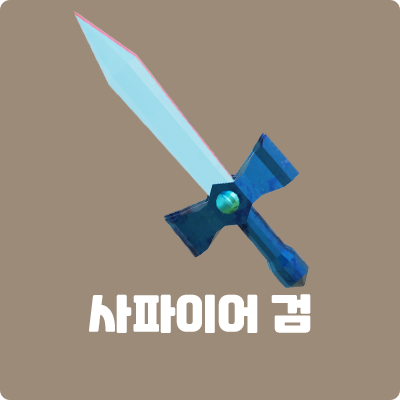
<style>
.page{position:relative;width:400px;height:400px;background:#9c8b79}
.page>*{position:absolute;margin:0}
.t1{font:45px "TTTogether";color:#ffffff}
</style>
<div class="page">
<p class="t1" style="left:89px;top:294px;width:222px;height:39px">사파이어 검</p>
</div>
